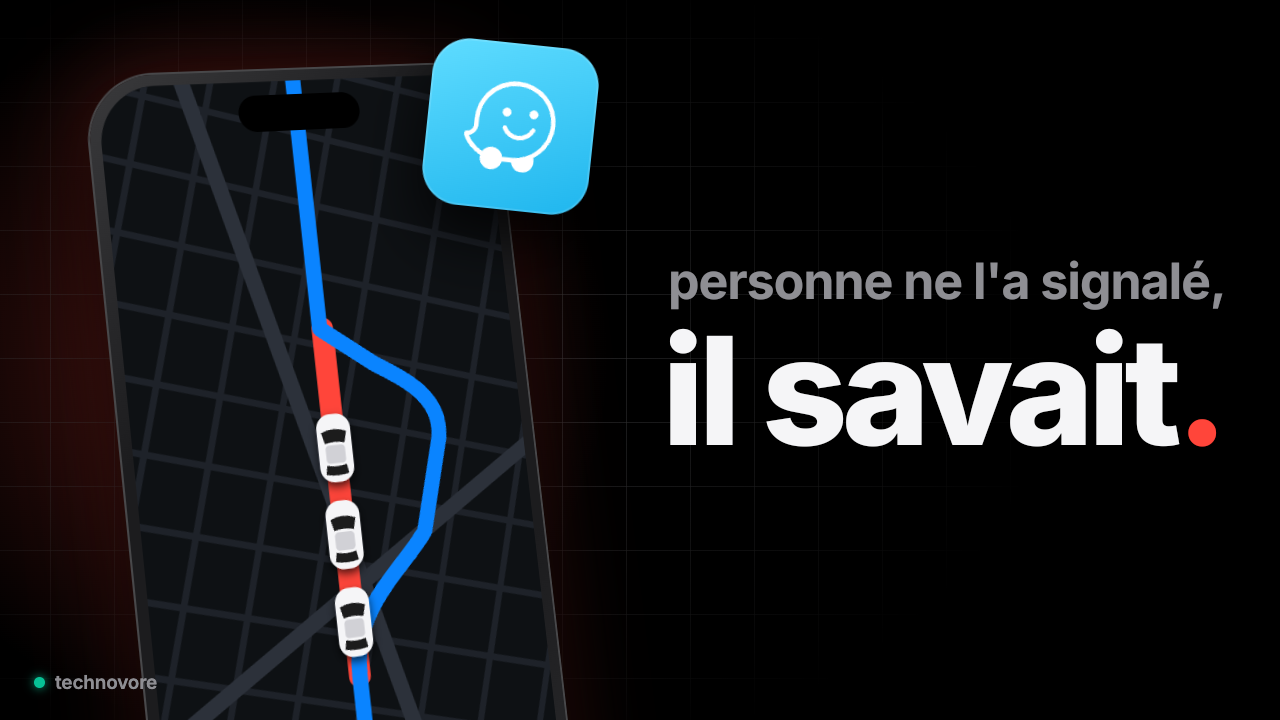
<style>
.page{position:relative;width:1280px;height:720px;background:#000000}
.page>*{position:absolute;margin:0}
.t1{font:50px "Inter-Bold";letter-spacing:-0.02em;color:#8e8e93}
.t2{font:150px "Inter-ExtraBold";letter-spacing:-0.04em;color:#f5f5f7}
.t3{font:150px "Inter-ExtraBold";letter-spacing:-0.04em;color:#ff453a}
</style>
<div class="page">
<p class="t1" style="left:670px;top:260px;width:554px;height:51px">personne ne l'a signalé,</p>
<p class="t2" style="left:668px;top:328px;width:550px;height:120px">il savait<span class="t3">.</span></p>
</div>
